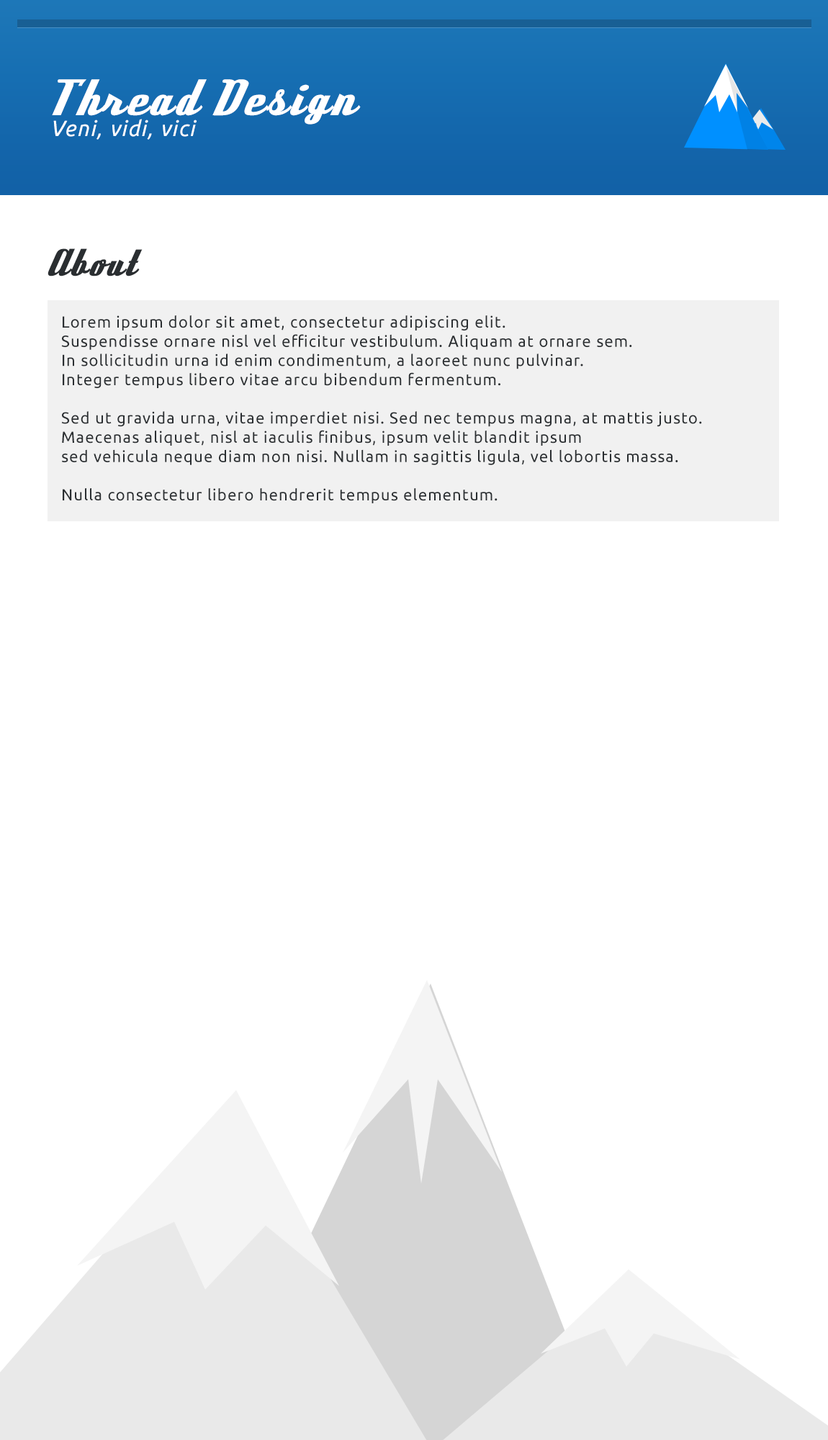
<style>
.page{position:relative;width:828px;height:1440px;background:#ffffff}
.page>*{position:absolute;margin:0}
.t1{font:48px "DeftoneStylus-Regular";letter-spacing:0.05em;color:#ffffff}
.t2{font:22px "Ubuntu-Italic";letter-spacing:0.05em;color:#ffffff}
.t3{font:36px "DeftoneStylus-Regular";letter-spacing:0.05em;color:#2a2e31}
.t4{font:16px "Ubuntu";letter-spacing:0.05em;color:#2a2e31}
</style>
<div class="page">
<p class="t1" style="left:52px;top:79px;width:309px;height:46px">Thread Design</p>
<p class="t2" style="left:53px;top:119px;width:144px;height:21px">Veni, vidi, vici</p>
<p class="t3" style="left:48px;top:248px;width:95px;height:28px">About</p>
<p class="t4" style="left:61px;top:315px;width:641px;height:188px">Lorem ipsum dolor sit amet, consectetur adipiscing elit.<br>Suspendisse ornare nisl vel efficitur vestibulum. Aliquam at ornare sem.<br>In sollicitudin urna id enim condimentum, a laoreet nunc pulvinar.<br>Integer tempus libero vitae arcu bibendum fermentum.<br><br>Sed ut gravida urna, vitae imperdiet nisi. Sed nec tempus magna, at mattis justo.<br>Maecenas aliquet, nisl at iaculis finibus, ipsum velit blandit ipsum<br>sed vehicula neque diam non nisi. Nullam in sagittis ligula, vel lobortis massa.<br><br>Nulla consectetur libero hendrerit tempus elementum.</p>
</div>
